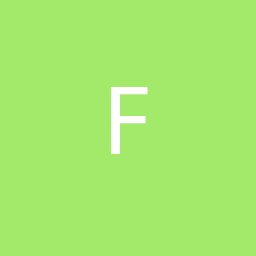
<style>
.page{position:relative;width:256px;height:256px;background:#a3ea6a}
.page>*{position:absolute;margin:0}
.t1{font:100px "MyriadPro-Regular";color:#ffffff}
</style>
<div class="page">
<p class="t1" style="left:111px;top:87px;width:37px;height:67px">F</p>
</div>
